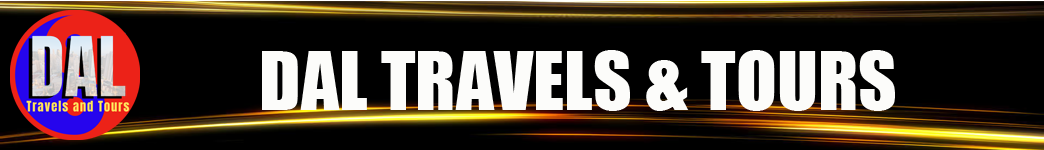
<style>
.page{position:relative;width:1044px;height:150px;background:#000000}
.page>*{position:absolute;margin:0}
.t1{font:75px "Impact";color:#fcfcfa}
</style>
<div class="page">
<p class="t1" style="left:262px;top:50px;width:633px;height:61px">DAL TRAVELS &amp; TOURS</p>
</div>
